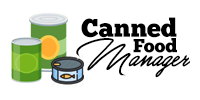
<style>
.page{position:relative;width:200px;height:100px;background:#ffffff}
.page>*{position:absolute;margin:0}
.t1{font:25.6px "ChunkFiveEx";color:#000000}
.t2{font:28px "GreatDayBoldPersonalUse";color:#000000}
.t3{font:19px "ChunkFiveEx";color:#000000}
</style>
<div class="page">
<p class="t1" style="left:81px;top:17px;width:96px;height:21px">Canned</p>
<p class="t2" style="left:76px;top:38px;width:114px;height:40px">Manager</p>
<p class="t3" style="left:133px;top:38px;width:44px;height:15px">Food</p>
</div>
